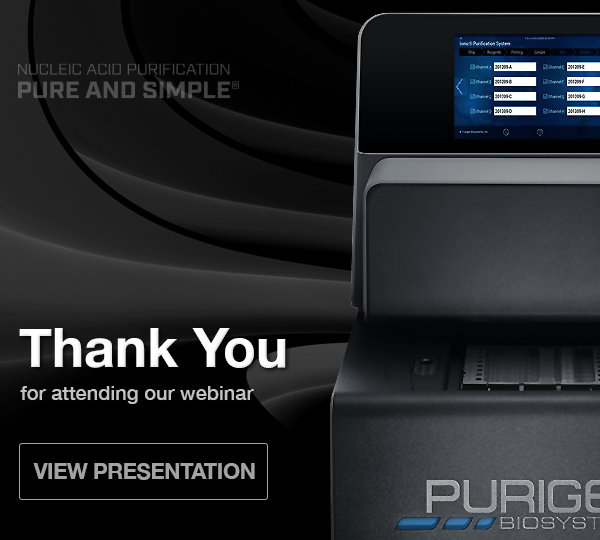
<style>
.page{position:relative;width:600px;height:540px}
.page>*{position:absolute;margin:0}
.t1{font:54px "HelveticaNeue-Bold";color:#ffffff}
.t2{font:20px "HelveticaNeue-Medium";color:#c2c2c2}
.t3{font:21.6px "HelveticaNeue-Bold";letter-spacing:-0.01em;color:#a3a3a3;text-transform:uppercase}
</style>
<div class="page">
<p class="t1" style="left:19px;top:328px;width:267px;height:40px">Thank You</p>
<p class="t2" style="left:20px;top:386px;width:234px;height:18px">for attending our webinar</p>
<p class="t3" style="left:33px;top:463px;width:222px;height:17px">View Presentation</p>
</div>
